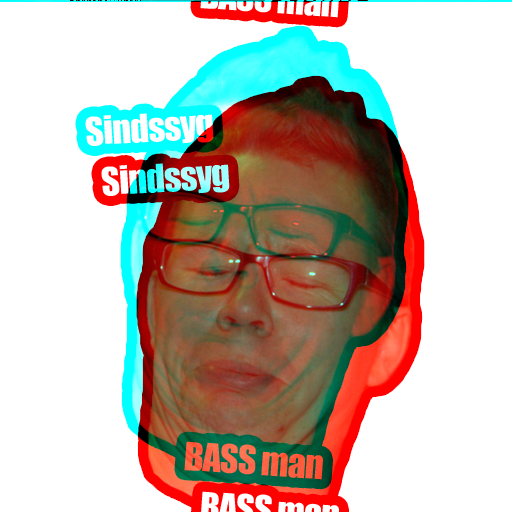
<style>
.page{position:relative;width:512px;height:512px;background:#ffffff}
.page>*{position:absolute;margin:0}
.t1{font:36px "Impact";letter-spacing:-0.025em;color:#ffffff}
.t2{font:36px "Impact";letter-spacing:-0.025em;color:#ff6344}
</style>
<div class="page">
<p class="t1" style="left:85px;top:111px;width:129px;height:33px;rotate:-3deg">Sindssyg</p>
<p class="t2" style="left:184px;top:439px;width:139px;height:39px;rotate:4deg">BASS man</p>
</div>
